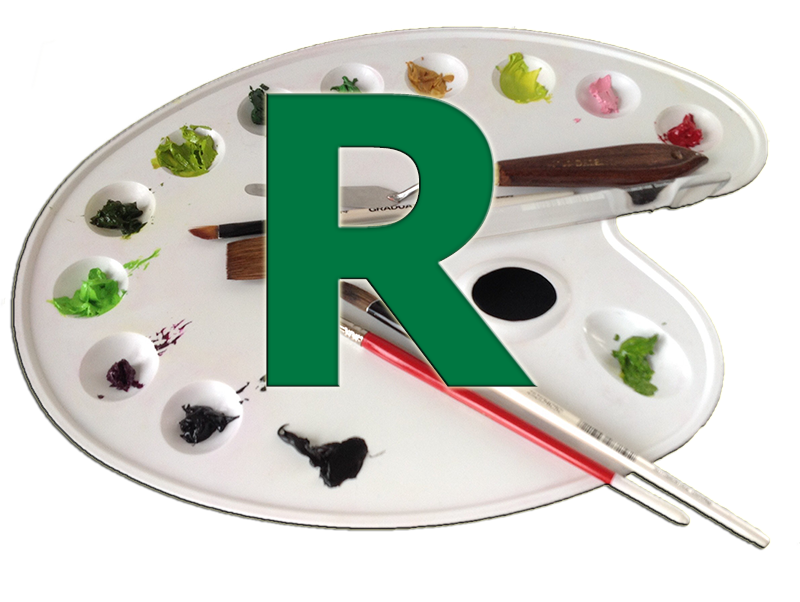
<style>
.page{position:relative;width:800px;height:602px;background:#ffffff}
.page>*{position:absolute;margin:0}
.t1{font:403.1px "Tahoma-Bold";color:#007741}
</style>
<div class="page">
<p class="t1" style="left:266px;top:93px;width:272px;height:294px">R</p>
</div>
